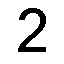
<style>
.page{position:relative;width:64px;height:64px;background:#ffffff}
.page>*{position:absolute;margin:0}
.t1{font:60px "MicrosoftSansSerif";color:#000000}
</style>
<div class="page">
<p class="t1" style="left:18px;top:8px;width:28px;height:44px">2</p>
</div>
